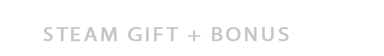
<style>
.page{position:relative;width:384px;height:56px;background:#ffffff}
.page>*{position:absolute;margin:0}
.t1{font:19.8px "MyriadPro-Regular";letter-spacing:0.1em;color:#c7c7c7;text-transform:uppercase;font-weight:bold;scale:1.11 1}
</style>
<div class="page">
<p class="t1" style="left:43px;top:27px;width:246px;height:15px">sTEAM GIFT + bonus</p>
</div>
